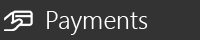
<style>
.page{position:relative;width:200px;height:40px;background:#333333}
.page>*{position:absolute;margin:0}
.t1{font:25px "SegoeUI-Semilight";color:#ffffff}
</style>
<div class="page">
<p class="t1" style="left:47px;top:11px;width:101px;height:24px">Payments</p>
</div>
